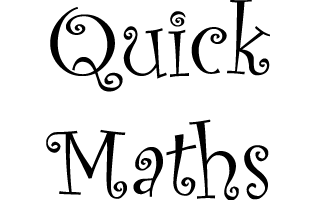
<style>
.page{position:relative;width:325px;height:200px;background:#ffffff}
.page>*{position:absolute;margin:0}
.t1{font:100px "CurlzMT";color:#000000}
</style>
<div class="page">
<p class="t1" style="left:46px;top:0px;width:224px;height:201px;text-align:center">Quick<br>Maths</p>
</div>
